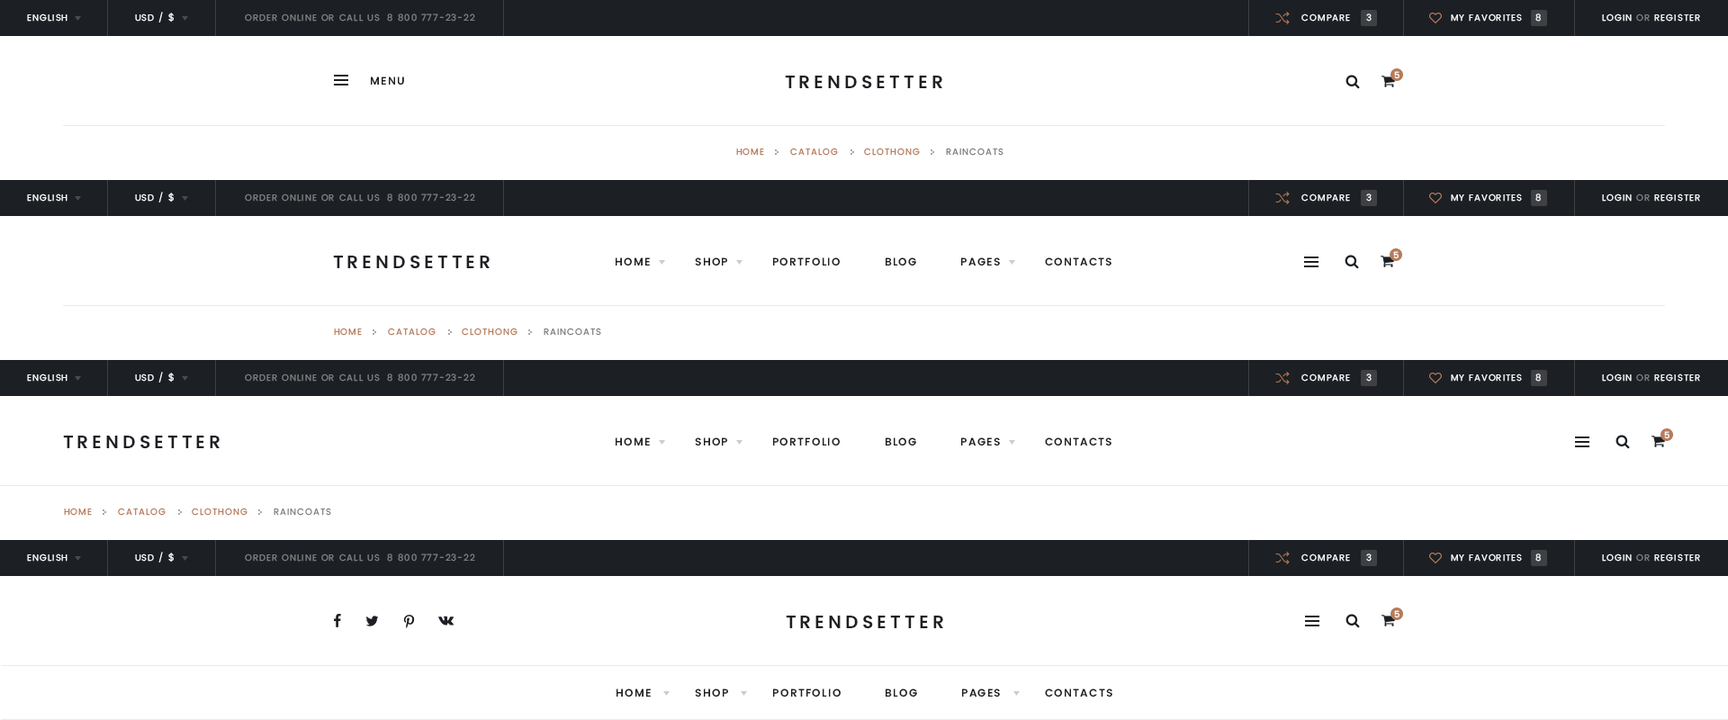
<style>
.page{position:relative;width:1728px;height:720px;background:#ffffff}
.page>*{position:absolute;margin:0}
.t1{font:9px "Poppins-Regular";letter-spacing:0.1em;color:#f4f7f8;text-transform:uppercase}
.t2{font:9.9px "Poppins-Regular";letter-spacing:0.1em;color:#f4f7f8;text-transform:uppercase}
.t3{font:9px "Poppins-Regular";letter-spacing:0.1em;color:#7b7d7f;text-transform:uppercase}
.t4{font:10.8px "Poppins-SemiBold";letter-spacing:0.1em;color:#1c1f23;text-transform:uppercase}
.t5{font:18px "Poppins-SemiBold";letter-spacing:0.2em;color:#1c1f23;text-transform:uppercase}
.t6{font:9px "Poppins-Medium";letter-spacing:0.2em;color:#ffffff;text-transform:uppercase}
.t7{font:9px "Poppins-Regular";letter-spacing:0.1em;color:#b67c5a;text-transform:uppercase}
</style>
<div class="page">
<p class="t1" style="left:27px;top:14px;width:41px;height:8px">English</p>
<p class="t1" style="left:135px;top:12px;width:39px;height:10px">USD / <span class="t2">$</span></p>
<p class="t3" style="left:245px;top:14px;width:230px;height:8px">ORDER ONLINE OR CALL US  8 800 777-23-22</p>
<p class="t1" style="left:1301px;top:14px;width:49px;height:8px">compare</p>
<p class="t1" style="left:1366px;top:14px;width:6px;height:8px">3</p>
<p class="t1" style="left:1451px;top:14px;width:71px;height:8px">My favorites</p>
<p class="t1" style="left:1535px;top:14px;width:6px;height:8px">8</p>
<p class="t1" style="left:1602px;top:14px;width:98px;height:8px">Login <span class="t3">or</span> Register</p>
<p class="t4" style="left:371px;top:76px;width:33px;height:9px">Menu</p>
<p class="t5" style="left:785px;top:75px;width:157px;height:14px">TrendSetter</p>
<p class="t6" style="left:1394px;top:71px;width:6px;height:8px">5</p>
<p class="t7" style="left:736px;top:148px;width:268px;height:8px">Home       Catalog       Clothong       <span class="t3">raincoats</span></p>
<p class="t1" style="left:27px;top:194px;width:41px;height:8px">English</p>
<p class="t1" style="left:135px;top:192px;width:39px;height:10px">USD / <span class="t2">$</span></p>
<p class="t3" style="left:245px;top:194px;width:230px;height:8px">ORDER ONLINE OR CALL US  8 800 777-23-22</p>
<p class="t1" style="left:1301px;top:194px;width:49px;height:8px">compare</p>
<p class="t1" style="left:1366px;top:194px;width:6px;height:8px">3</p>
<p class="t1" style="left:1451px;top:194px;width:71px;height:8px">My favorites</p>
<p class="t1" style="left:1535px;top:194px;width:6px;height:8px">8</p>
<p class="t1" style="left:1602px;top:194px;width:98px;height:8px">Login <span class="t3">or</span> Register</p>
<p class="t5" style="left:333px;top:255px;width:157px;height:14px">TrendSetter</p>
<p class="t4" style="left:616px;top:257px;width:496px;height:9px">HOME          SHOP          PORTFOLIO          BLOG          PAGES          contacts</p>
<p class="t6" style="left:1393px;top:251px;width:6px;height:8px">5</p>
<p class="t7" style="left:334px;top:328px;width:267px;height:8px">Home       Catalog       Clothong       <span class="t3">raincoats</span></p>
<p class="t1" style="left:27px;top:374px;width:41px;height:8px">English</p>
<p class="t1" style="left:135px;top:372px;width:39px;height:10px">USD / <span class="t2">$</span></p>
<p class="t3" style="left:245px;top:374px;width:230px;height:8px">ORDER ONLINE OR CALL US  8 800 777-23-22</p>
<p class="t1" style="left:1301px;top:374px;width:49px;height:8px">compare</p>
<p class="t1" style="left:1366px;top:374px;width:6px;height:8px">3</p>
<p class="t1" style="left:1451px;top:374px;width:71px;height:8px">My favorites</p>
<p class="t1" style="left:1535px;top:374px;width:6px;height:8px">8</p>
<p class="t1" style="left:1602px;top:374px;width:98px;height:8px">Login <span class="t3">or</span> Register</p>
<p class="t5" style="left:63px;top:435px;width:157px;height:14px">TrendSetter</p>
<p class="t4" style="left:616px;top:437px;width:496px;height:9px">HOME          SHOP          PORTFOLIO          BLOG          PAGES          contacts</p>
<p class="t6" style="left:1664px;top:431px;width:6px;height:8px">5</p>
<p class="t7" style="left:64px;top:508px;width:267px;height:8px">Home       Catalog       Clothong       <span class="t3">raincoats</span></p>
<p class="t1" style="left:27px;top:554px;width:41px;height:8px">English</p>
<p class="t1" style="left:135px;top:552px;width:39px;height:10px">USD / <span class="t2">$</span></p>
<p class="t3" style="left:245px;top:554px;width:230px;height:8px">ORDER ONLINE OR CALL US  8 800 777-23-22</p>
<p class="t1" style="left:1301px;top:554px;width:49px;height:8px">compare</p>
<p class="t1" style="left:1366px;top:554px;width:6px;height:8px">3</p>
<p class="t1" style="left:1451px;top:554px;width:71px;height:8px">My favorites</p>
<p class="t1" style="left:1535px;top:554px;width:6px;height:8px">8</p>
<p class="t1" style="left:1602px;top:554px;width:98px;height:8px">Login <span class="t3">or</span> Register</p>
<p class="t5" style="left:786px;top:615px;width:157px;height:14px">TrendSetter</p>
<p class="t6" style="left:1394px;top:610px;width:6px;height:8px">5</p>
<p class="t4" style="left:616px;top:688px;width:496px;height:9px">HOME          SHOP          PORTFOLIO          BLOG          PAGES          contacts</p>
</div>
